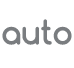
<style>
.page{position:relative;width:74px;height:68px;background:#ffffff}
.page>*{position:absolute;margin:0}
.t1{font:32.1px "Comfortaa-Bold";color:#7a7d80}
</style>
<div class="page">
<p class="t1" style="left:2px;top:19px;width:70px;height:26px">auto</p>
</div>
